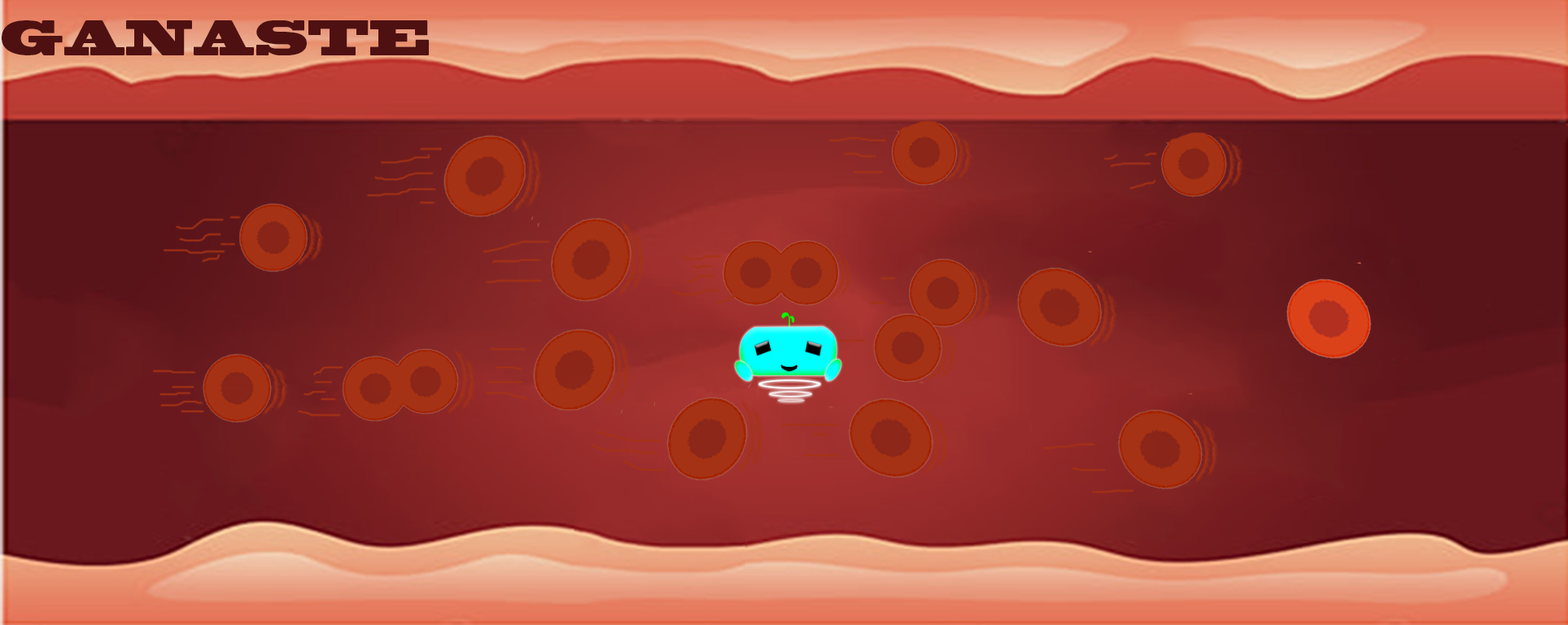
<style>
.page{position:relative;width:1568px;height:625px}
.page>*{position:absolute;margin:0}
.t1{font:46.7px "BlackoakStd";color:#4f1011;scale:0.72 1}
</style>
<div class="page">
<p class="t1" style="left:2px;top:20px;width:427px;height:35px">GANASTE</p>
</div>
